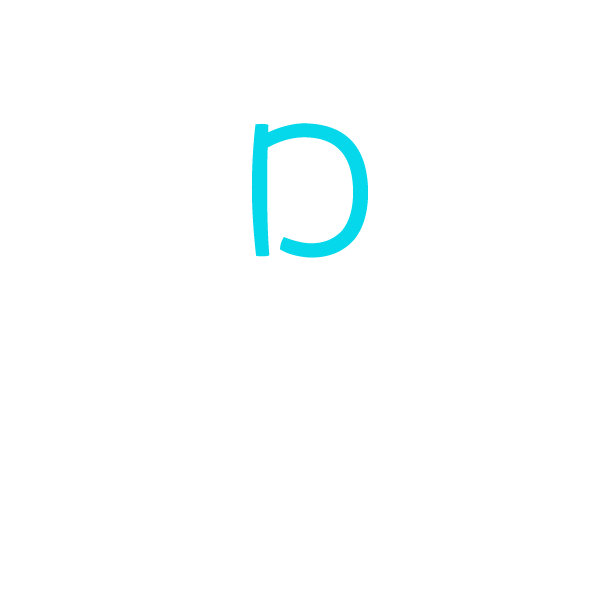
<style>
.page{position:relative;width:600px;height:600px;background:#ffffff}
.page>*{position:absolute;margin:0}
.t1{font:200px "DFWaWaSC-W5";color:#05d8eb}
</style>
<div class="page">
<p class="t1" style="left:251px;top:123px;width:118px;height:135px">D</p>
</div>
